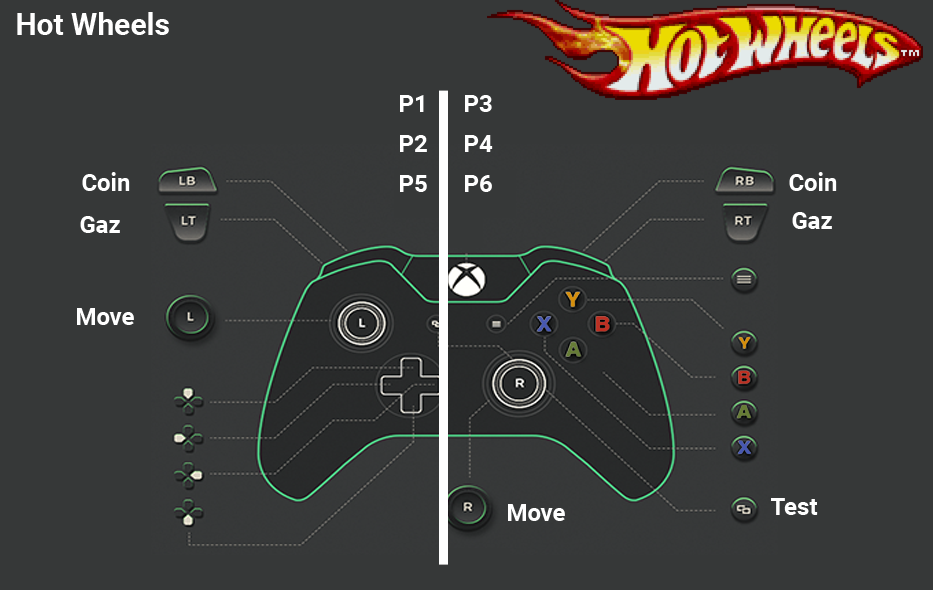
<style>
.page{position:relative;width:933px;height:590px;background:#363838}
.page>*{position:absolute;margin:0}
.t1{font:30px "Roboto-Bold";color:#ffffff}
.t2{font:24px/40px "Roboto-Bold";color:#ffffff}
.t3{font:24px "Roboto-Bold";color:#ffffff}
</style>
<div class="page">
<p class="t1" style="left:17px;top:12px;width:152px;height:23px">Hot Wheels</p>
<p class="t2" style="left:400px;top:95px;width:27px;height:97px;text-align:center">P1<br>P2<br>P5</p>
<p class="t2" style="left:465px;top:95px;width:28px;height:97px;text-align:center">P3<br>P4<br>P6</p>
<p class="t3" style="left:82px;top:172px;width:48px;height:19px">Coin</p>
<p class="t3" style="left:789px;top:172px;width:48px;height:19px">Coin</p>
<p class="t3" style="left:80px;top:216px;width:40px;height:17px">Gaz</p>
<p class="t3" style="left:792px;top:212px;width:40px;height:17px">Gaz</p>
<p class="t3" style="left:77px;top:308px;width:57px;height:17px">Move</p>
<p class="t3" style="left:508px;top:504px;width:57px;height:17px">Move</p>
<p class="t3" style="left:771px;top:498px;width:47px;height:17px">Test</p>
</div>
